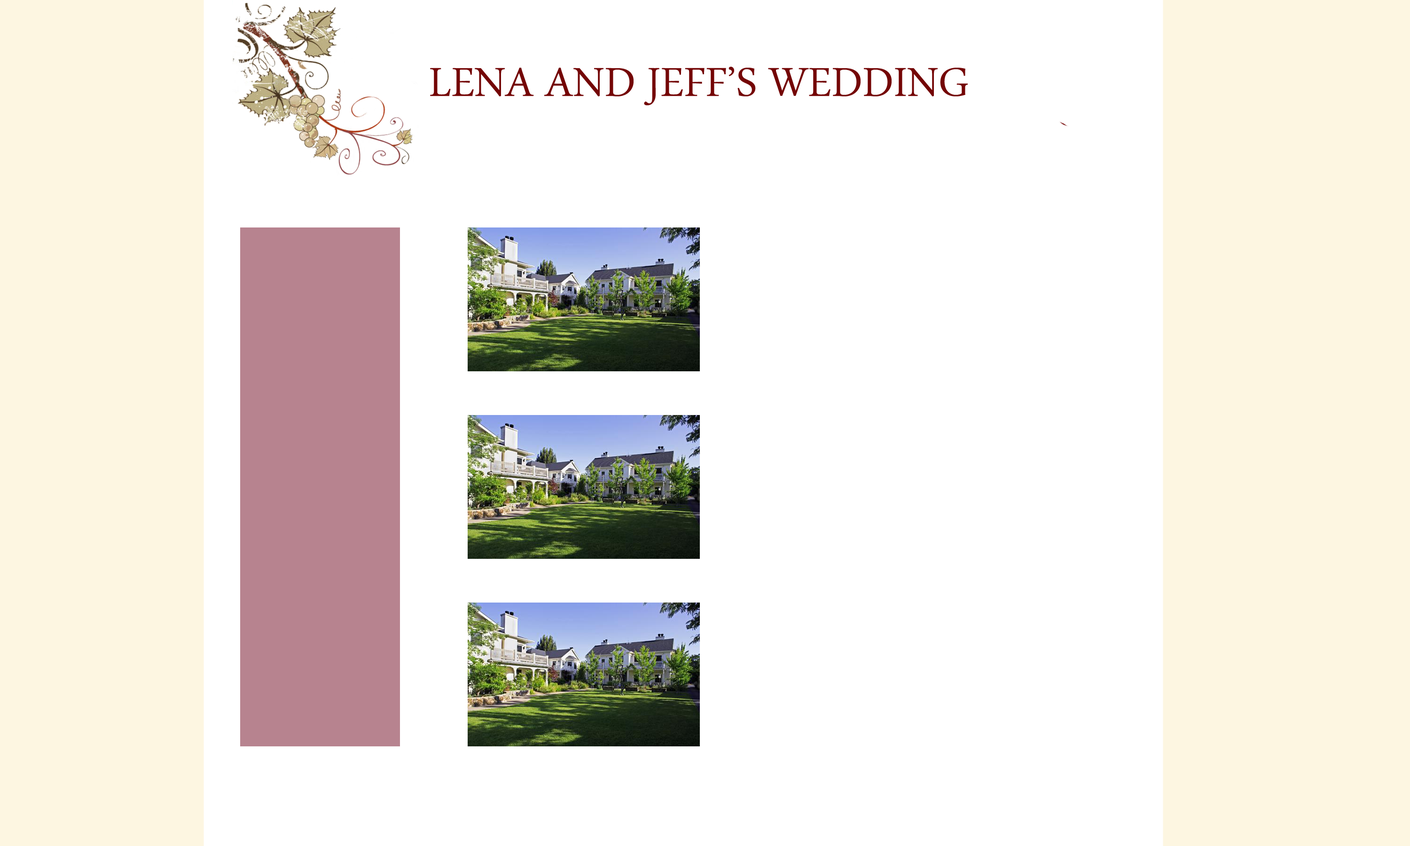
<style>
.page{position:relative;width:1410px;height:846px;background:#ffffff}
.page>*{position:absolute;margin:0}
.t1{font:58.7px "ArabicTypesetting";color:#740505}
</style>
<div class="page">
<p class="t1" style="left:430px;top:67px;width:538px;height:38px">LENA AND JEFF’S WEDDING</p>
</div>
